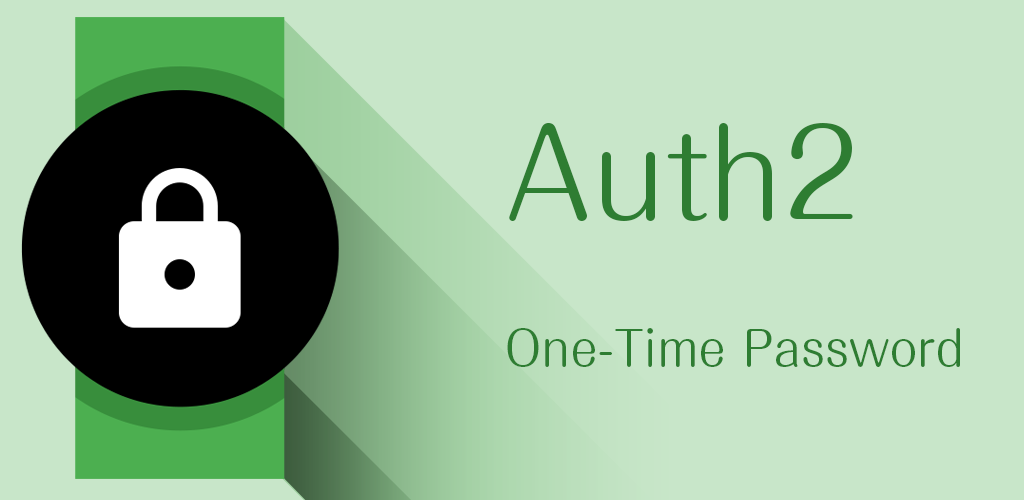
<style>
.page{position:relative;width:1024px;height:500px;background:#c8e6c9}
.page>*{position:absolute;margin:0}
.t1{font:48px "MaruFoPro-Regular";color:#2e7d32}
.t2{font:120px "MaruFoPro-Regular";color:#2e7d32}
</style>
<div class="page">
<p class="t1" style="left:507px;top:123px;width:453px;height:244px"><span class="t2">Auth2<br></span>One-Time Password</p>
</div>
